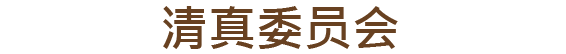
<style>
.page{position:relative;width:566px;height:54px;background:#ffffff}
.page>*{position:absolute;margin:0}
.t1{font:48px "MicrosoftJhengHeiBold";color:#684121}
</style>
<div class="page">
<p class="t1" style="left:163px;top:6px;width:235px;height:43px">清真委员会</p>
</div>
